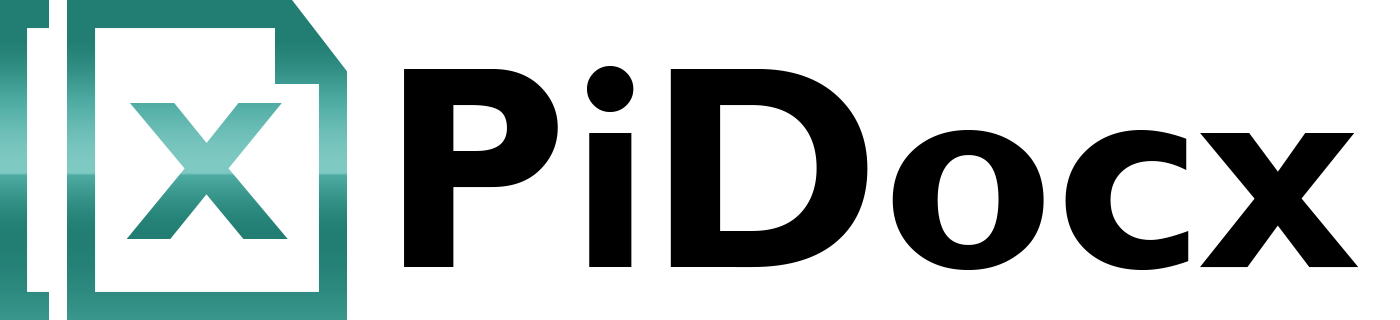
<style>
.page{position:relative;width:1400px;height:320px;background:#ffffff}
.page>*{position:absolute;margin:0}
.t1{font:290px "GillSansMT-Bold";color:#000000}
.t2{font:200px "GillSansMT-Bold"}
</style>
<div class="page">
<p class="t1" style="left:404px;top:66px;width:955px;height:204px">PiDocx</p>
<p class="t2" style="left:126px;top:103px;width:162px;height:136px">X</p>
</div>
